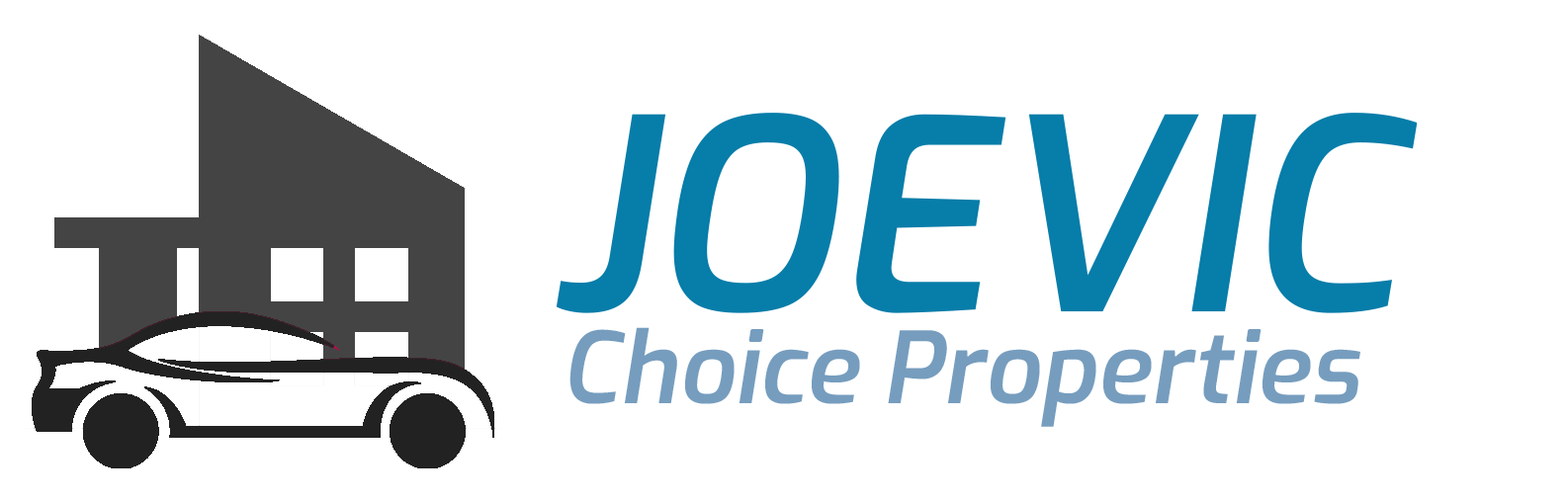
<style>
.page{position:relative;width:1568px;height:503px;background:#ffffff}
.page>*{position:absolute;margin:0}
.t1{font:266.9px "Exo-SemiBoldItalic";color:#077da9}
.t2{font:98.9px "Exo-SemiBoldItalic";color:#769dbe}
</style>
<div class="page">
<p class="t1" style="left:556px;top:113px;width:861px;height:200px">JOEVIC</p>
<p class="t2" style="left:569px;top:327px;width:791px;height:100px">Choice Properties</p>
</div>
